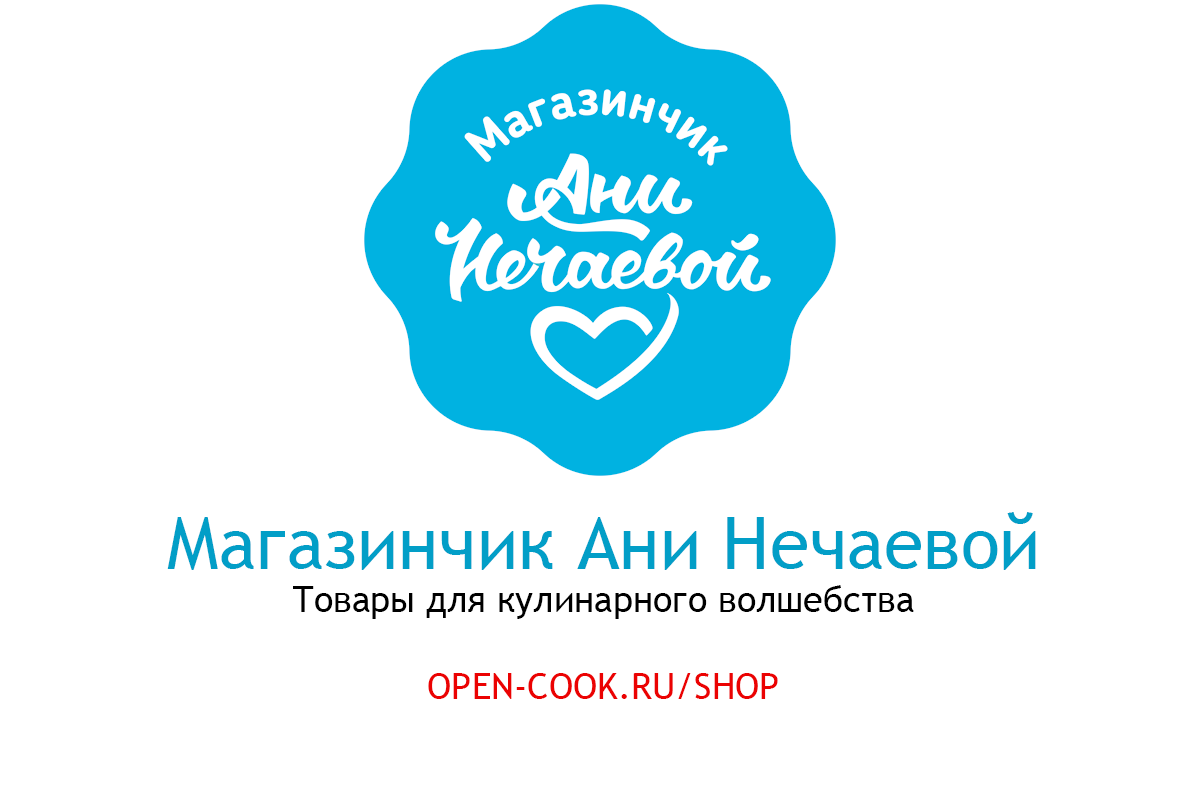
<style>
.page{position:relative;width:1200px;height:800px;background:#ffffff}
.page>*{position:absolute;margin:0}
.t1{font:36px "TrebuchetMS";color:#000000}
.t2{font:72px "TrebuchetMS";color:#029ec7}
.t3{font:36px "TrebuchetMS";color:#eb0202}
</style>
<div class="page">
<p class="t1" style="left:167px;top:512px;width:869px;height:187px;text-align:center"><span class="t2">Магазинчик Ани Нечаевой<br></span>Товары для кулинарного волшебства<br><span class="t3"><br>OPEN-COOK.RU/SHOP</span></p>
</div>
